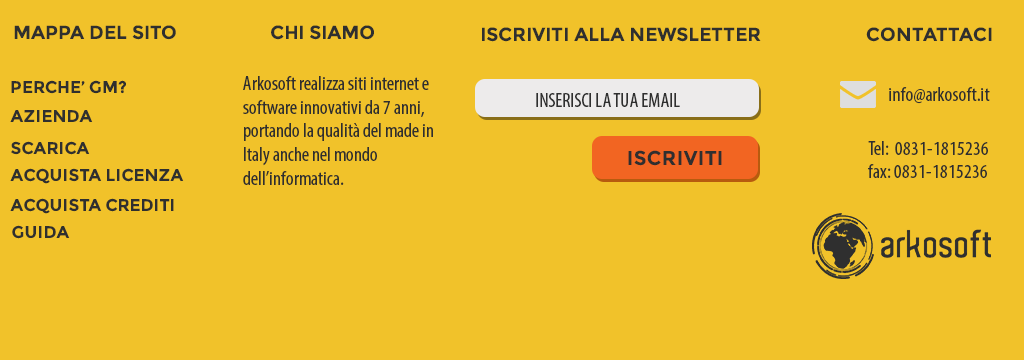
<style>
.page{position:relative;width:1024px;height:360px;background:#f1c22a}
.page>*{position:absolute;margin:0}
.t1{font:19px "Montserrat-Bold";color:#2f2f2f}
.t2{font:20px/23.7px "MyriadPro-Cond";color:#2f2f2f}
.t3{font:17px "Montserrat-Bold";color:#2f2f2f}
.t4{font:20px "MyriadPro-Cond";color:#2f2f2f}
.t5{font:20px "Montserrat-Bold";color:#2f2f2f}
</style>
<div class="page">
<p class="t1" style="left:14px;top:25px;width:162px;height:15px">MAPPA DEL SITO</p>
<p class="t1" style="left:271px;top:25px;width:103px;height:15px">CHI SIAMO</p>
<p class="t1" style="left:482px;top:27px;width:279px;height:15px">ISCRIVITI ALLA NEWSLETTER</p>
<p class="t1" style="left:866px;top:27px;width:126px;height:15px">CONTATTACI</p>
<p class="t2" style="left:243px;top:76px;width:190px;height:109px">Arkosoft realizza siti internet e<br>software innovativi da 7 anni,<br>portando la qualità del made in<br>Italy anche nel mondo<br>dell’informatica.</p>
<p class="t3" style="left:11px;top:80px;width:115px;height:14px">PERCHE’ GM?</p>
<p class="t4" style="left:889px;top:87px;width:101px;height:17px">info@arkosoft.it</p>
<p class="t4" style="left:536px;top:93px;width:144px;height:14px">INSERISCI LA TUA EMAIL</p>
<p class="t3" style="left:10px;top:110px;width:83px;height:12px">AZIENDA</p>
<p class="t3" style="left:11px;top:141px;width:79px;height:14px">SCARICA</p>
<p class="t5" style="left:628px;top:150px;width:94px;height:16px">ISCRIVITI</p>
<p class="t2" style="left:868px;top:141px;width:120px;height:37px">Tel:  0831-1815236<br>fax: 0831-1815236</p>
<p class="t3" style="left:10px;top:168px;width:174px;height:16px">ACQUISTA LICENZA</p>
<p class="t3" style="left:10px;top:198px;width:164px;height:16px">ACQUISTA CREDITI</p>
<p class="t3" style="left:12px;top:225px;width:58px;height:14px">GUIDA</p>
</div>
